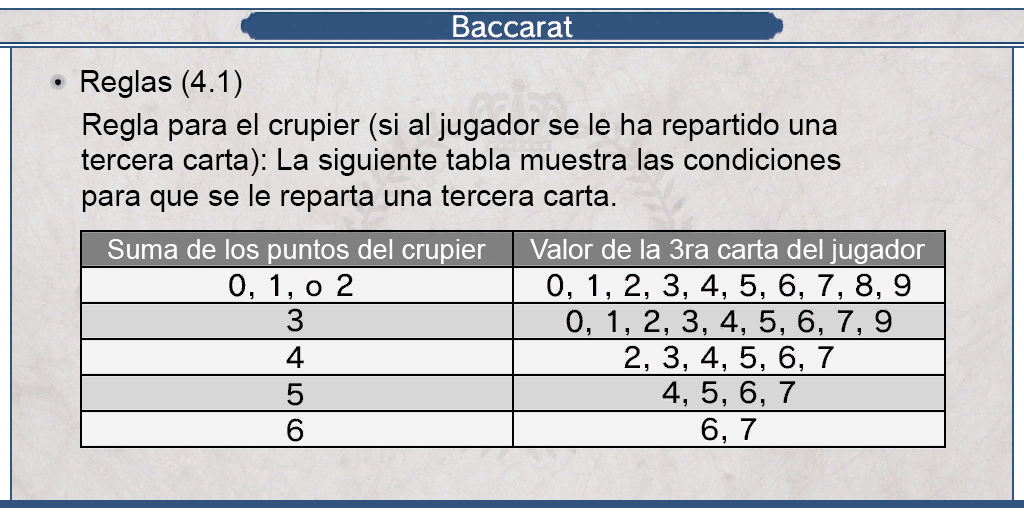
<style>
.page{position:relative;width:1024px;height:512px}
.page>*{position:absolute;margin:0}
.t1{font:29.9px "ArialMT";color:#000000}
.t2{font:27.3px "ArialMT";color:#ffffff}
</style>
<div class="page">
<p class="t1" style="left:81px;top:70px;width:161px;height:28px">Reglas (4.1)</p>
<p class="t1" style="left:81px;top:113px;width:760px;height:99px;text-align:justify">Regla para el crupier (si al jugador se le ha repartido una <br>tercera carta): La siguiente tabla muestra las condiciones <br>para que se le reparta una tercera carta.</p>
<p class="t2" style="left:108px;top:239px;width:378px;height:25px">Suma de los puntos del crupier</p>
<p class="t2" style="left:530px;top:239px;width:395px;height:25px">Valor de la 3ra carta del jugador</p>
</div>
